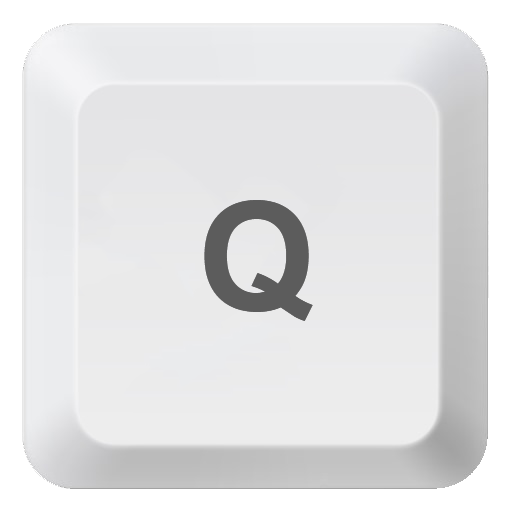
<style>
.page{position:relative;width:512px;height:512px}
.page>*{position:absolute;margin:0}
.t1{font:150px "Arial-BoldMT";color:#5c5c5c}
</style>
<div class="page">
<p class="t1" style="left:204px;top:200px;width:109px;height:121px">Q</p>
</div>
